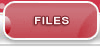
<style>
.page{position:relative;width:100px;height:48px}
.page>*{position:absolute;margin:0}
.t1{font:10.3px "Arial-BoldMT";letter-spacing:0.025em;color:#ffffff;scale:1.16 1}
</style>
<div class="page">
<p class="t1" style="left:35px;top:16px;width:34px;height:9px">FILES</p>
</div>
